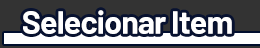
<style>
.page{position:relative;width:260px;height:48px;background:#333333}
.page>*{position:absolute;margin:0}
.t1{font:32px "Barlow-Bold";letter-spacing:-0.025em;color:#ffffff}
</style>
<div class="page">
<p class="t1" style="left:23px;top:10px;width:209px;height:24px">Selecionar Item</p>
</div>
